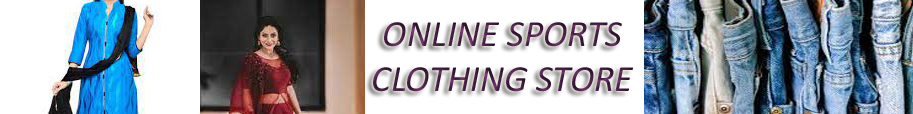
<style>
.page{position:relative;width:913px;height:114px;background:#ffffff}
.page>*{position:absolute;margin:0}
.t1{font:37.3px "Calibri-Italic";color:#451f45}
</style>
<div class="page">
<p class="t1" style="left:373px;top:22px;width:260px;height:70px;text-align:center">ONLINE SPORTS <br>CLOTHING STORE</p>
</div>
